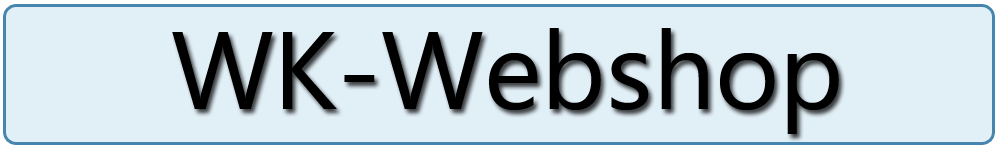
<style>
.page{position:relative;width:1000px;height:150px;background:#e1eff7}
.page>*{position:absolute;margin:0}
.t1{font:110px "MyanmarText";color:#000000}
</style>
<div class="page">
<p class="t1" style="left:172px;top:28px;width:667px;height:106px">WK-Webshop</p>
</div>
